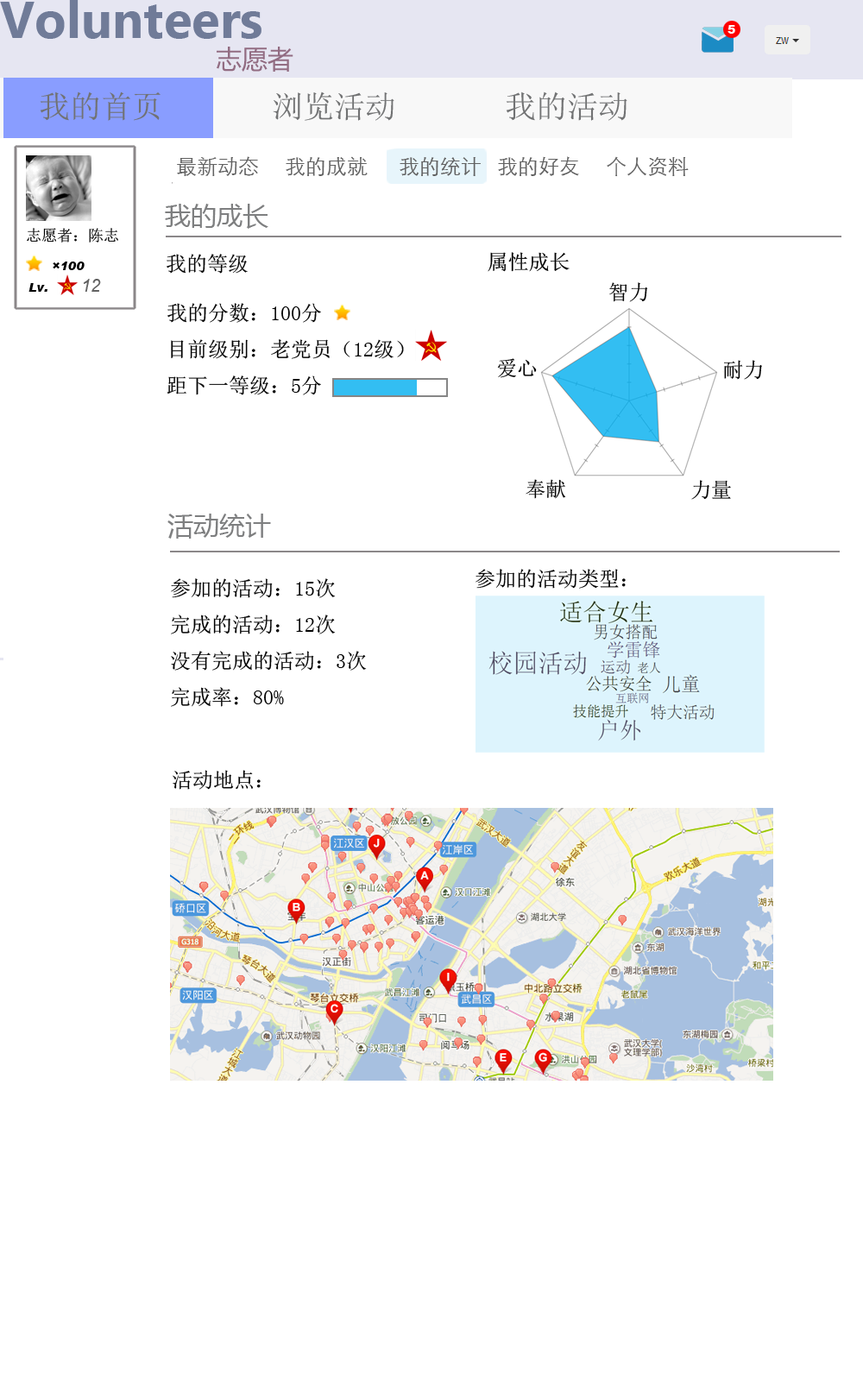
<style>
.page{position:relative;width:863px;height:1381px;background:#ffffff}
.page>*{position:absolute;margin:0}
.t1{font:12.1px "Arial-Black";color:#ffffff}
.t2{font:31.1px "SimSun";color:#717273}
.t3{font:20.7px "STXihei";color:#626262}
.t4{font:25.9px "MicrosoftYaHei";color:#7e7f80}
.t5{font:15.5px "SimSun";color:#000000}
.t6{font:20.7px "SimSun";color:#020202}
.t7{font:20.7px "SimSun";color:#000000}
.t8{font:12.1px "Arial-BlackItalic";color:#000000}
.t9{font:17.3px "Arial-ItalicMT";color:#626262}
.t10{font:20.4px "SimSun";color:#020202}
</style>
<div class="page">
<p class="t1" style="left:728px;top:25px;width:8px;height:9px">5</p>
<p class="t2" style="left:40px;top:92px;width:588px;height:29px">我的首页       浏览活动       我的活动</p>
<p class="t3" style="left:177px;top:156px;width:512px;height:21px">最新动态     我的成就      我的统计   我的好友     个人资料</p>
<p class="t4" style="left:165px;top:204px;width:103px;height:25px">我的成长</p>
<p class="t5" style="left:27px;top:228px;width:91px;height:15px">志愿者：陈志</p>
<p class="t6" style="left:167px;top:254px;width:81px;height:20px">我的等级</p>
<p class="t7" style="left:488px;top:252px;width:82px;height:20px">属性成长</p>
<p class="t8" style="left:53px;top:262px;width:32px;height:8px">×100</p>
<p class="t9" style="left:84px;top:279px;width:17px;height:13px">12</p>
<p class="t8" style="left:28px;top:283px;width:19px;height:9px">Lv.</p>
<p class="t10" style="left:609px;top:282px;width:39px;height:20px">智力</p>
<p class="t6" style="left:167px;top:303px;width:237px;height:92px">我的分数：100分<br>目前级别：老党员（12级）<br>距下一等级：5分</p>
<p class="t10" style="left:497px;top:358px;width:40px;height:20px">爱心</p>
<p class="t10" style="left:724px;top:360px;width:38px;height:20px">耐力</p>
<p class="t10" style="left:526px;top:479px;width:40px;height:20px">奉献</p>
<p class="t10" style="left:691px;top:480px;width:40px;height:20px">力量</p>
<p class="t4" style="left:167px;top:514px;width:104px;height:25px">活动统计</p>
<p class="t7" style="left:476px;top:569px;width:150px;height:20px">参加的活动类型：</p>
<p class="t7" style="left:171px;top:578px;width:196px;height:129px">参加的活动：15次<br>完成的活动：12次<br>没有完成的活动：3次<br>完成率：80%</p>
<p class="t7" style="left:173px;top:770px;width:88px;height:20px">活动地点：</p>
</div>
